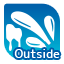
<style>
.page{position:relative;width:64px;height:64px;background:#ffffff}
.page>*{position:absolute;margin:0}
.t1{font:12px "JK-Gothic-M";color:#ffffff}
</style>
<div class="page">
<p class="t1" style="left:14px;top:49px;width:46px;height:9px">Outside</p>
</div>
